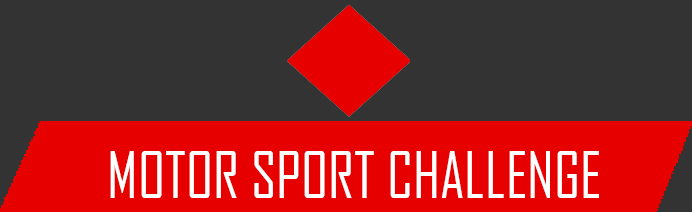
<style>
.page{position:relative;width:692px;height:212px;background:#333333}
.page>*{position:absolute;margin:0}
.t1{font:61px "AgencyFB-Reg";color:#ffffff}
</style>
<div class="page">
<p class="t1" style="left:110px;top:151px;width:489px;height:47px">MOTOR SPORT CHALLENGE</p>
</div>
